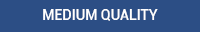
<style>
.page{position:relative;width:200px;height:32px;background:#2c4e85}
.page>*{position:absolute;margin:0}
.t1{font:14px "Roboto-Medium";color:#ffffff}
</style>
<div class="page">
<p class="t1" style="left:43px;top:9px;width:115px;height:12px">MEDIUM QUALITY</p>
</div>
